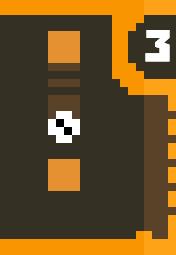
<style>
.page{position:relative;width:176px;height:255px;background:#353024}
.page>*{position:absolute;margin:0}
.t1{font:44.5px "a_Simpler-Bold";color:#ffffff}
</style>
<div class="page">
<p class="t1" style="left:145px;top:30px;width:25px;height:32px">3</p>
<p class="t1" style="left:145px;top:30px;width:25px;height:32px">3</p>
</div>
